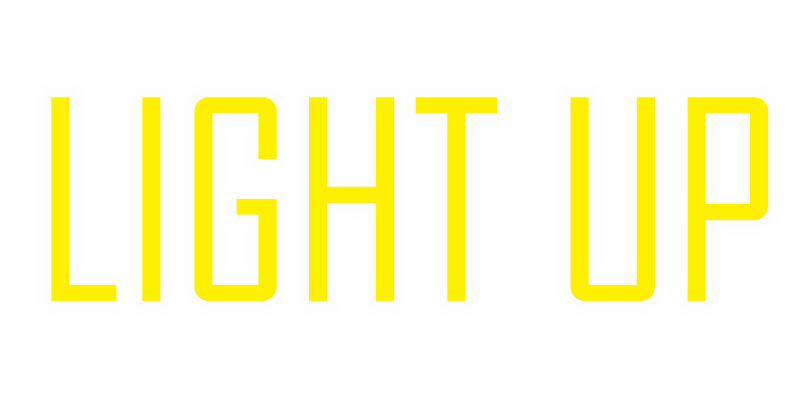
<style>
.page{position:relative;width:800px;height:400px;background:#ffffff}
.page>*{position:absolute;margin:0}
.t1{font:266.7px "AgencyFB-Reg";color:#fff000}
</style>
<div class="page">
<p class="t1" style="left:51px;top:97px;width:718px;height:204px">LIGHT UP</p>
</div>
